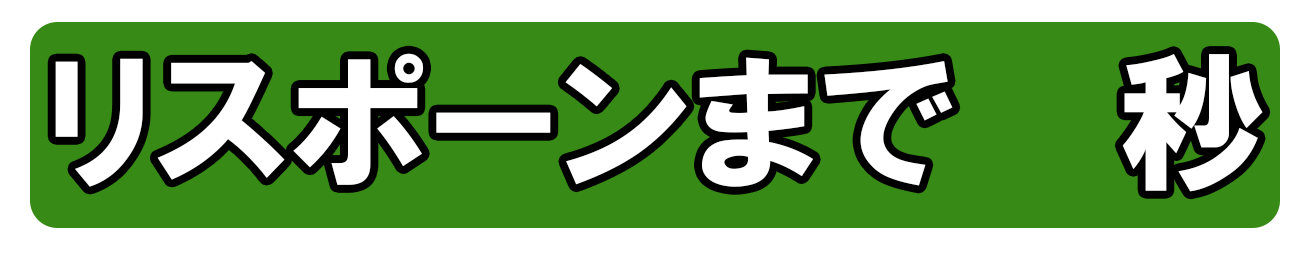
<style>
.page{position:relative;width:1309px;height:254px;background:#368a15}
.page>*{position:absolute;margin:0}
.t1{font:150px "HGPSoeiKakugothicUB";letter-spacing:0.025em;color:#ffffff}
</style>
<div class="page">
<p class="t1" style="left:55px;top:53px;width:1208px;height:139px">リスポーンまで   秒</p>
</div>
